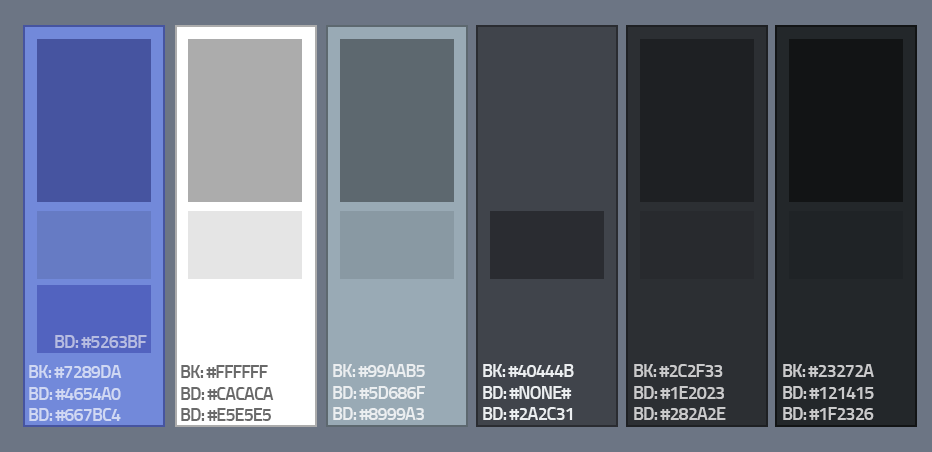
<style>
.page{position:relative;width:932px;height:452px;background:#6c7584}
.page>*{position:absolute;margin:0}
.t1{font:18px "Titillium-Semibold";letter-spacing:-0.05em;color:#b6bce1}
.t2{font:18px "Titillium-Semibold";letter-spacing:-0.05em;color:#d0d8f3}
.t3{font:18px "Titillium-Semibold";letter-spacing:-0.05em;color:#696969}
.t4{font:18px "Titillium-Semibold";letter-spacing:-0.05em;color:#ebeef0}
.t5{font:18px "Titillium-Semibold";letter-spacing:-0.05em;color:#cacacb}
</style>
<div class="page">
<p class="t1" style="left:55px;top:335px;width:92px;height:13px">BD: #5263BF</p>
<p class="t2" style="left:29px;top:365px;width:93px;height:56px">BK: #7289DA<br>BD: #4654A0<br>BD: #667BC4</p>
<p class="t3" style="left:181px;top:365px;width:93px;height:56px">BK: #FFFFFF<br>BD: #CACACA<br>BD: #E5E5E5</p>
<p class="t4" style="left:333px;top:364px;width:92px;height:56px">BK: #99AAB5<br>BD: #5D686F<br>BD: #8999A3</p>
<p class="t4" style="left:483px;top:364px;width:91px;height:56px">BK: #40444B<br>BD: #NONE#<br>BD: #2A2C31</p>
<p class="t5" style="left:634px;top:364px;width:92px;height:56px">BK: #2C2F33<br>BD: #1E2023<br>BD: #282A2E</p>
<p class="t5" style="left:783px;top:364px;width:91px;height:56px">BK: #23272A<br>BD: #121415<br>BD: #1F2326</p>
</div>
